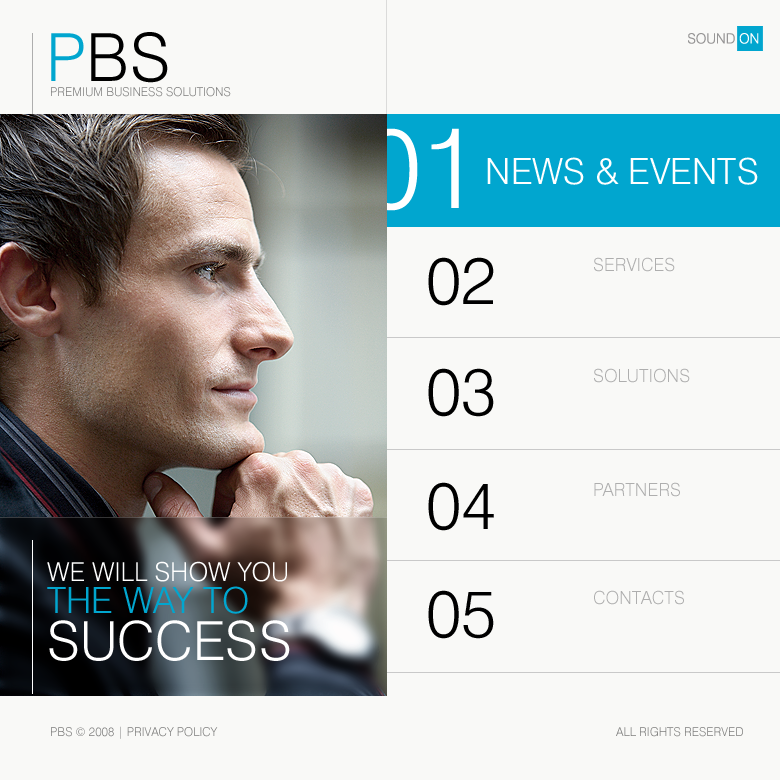
<style>
.page{position:relative;width:780px;height:780px;background:#f9f9f7}
.page>*{position:absolute;margin:0}
.t1{font:66.3px "Swiss721BT-Light";color:#000000;text-transform:uppercase}
.t2{font:66.3px "Swiss721BT-Light";color:#01a6cf;text-transform:uppercase}
.t3{font:13.9px "Swiss721BT-Light";color:#979696;text-transform:uppercase}
.t4{font:13.9px "Swiss721BT-Light";color:#ffffff;text-transform:uppercase}
.t5{font:12px "Swiss721BT-Light";color:#7c7c7b;text-transform:uppercase}
.t6{font:113.3px "Swiss721BT-Light";color:#ffffff;text-transform:uppercase}
.t7{font:36px "Swiss721BT-Light";color:#ffffff;text-transform:uppercase}
.t8{font:18px "Swiss721BT-Light";color:#aeaeae;text-transform:uppercase}
.t9{font:26px/47.9px "Swiss721BT-Light";color:#ffffff;text-transform:uppercase}
.t10{font:36px/32px "Swiss721BT-Light";color:#01a6cf;text-transform:uppercase}
.t11{font:54px/47.9px "Swiss721BT-Light";color:#ffffff;text-transform:uppercase}
.t12{font:12px "Swiss721BT-Light";text-transform:uppercase}
</style>
<div class="page">
<p class="t1" style="left:51px;top:32px;width:117px;height:51px"><span class="t2">P</span>BS</p>
<p class="t3" style="left:688px;top:33px;width:71px;height:11px">sound <span class="t4">on</span></p>
<p class="t5" style="left:51px;top:87px;width:180px;height:10px">premium business solutions</p>
<p class="t6" style="left:365px;top:128px;width:94px;height:83px">01</p>
<p class="t7" style="left:487px;top:157px;width:271px;height:28px">news &amp; events</p>
<p class="t1" style="left:428px;top:257px;width:66px;height:49px">02</p>
<p class="t8" style="left:594px;top:257px;width:81px;height:15px">services</p>
<p class="t1" style="left:428px;top:368px;width:66px;height:49px">03</p>
<p class="t8" style="left:594px;top:368px;width:96px;height:15px">solutions</p>
<p class="t1" style="left:428px;top:482px;width:66px;height:49px">04</p>
<p class="t8" style="left:594px;top:482px;width:86px;height:15px">partners</p>
<p class="t9" style="left:47px;top:561px;width:243px;height:100px">We will show you<br><span class="t10">the way to <br></span><span class="t11">success</span></p>
<p class="t1" style="left:428px;top:590px;width:66px;height:49px">05</p>
<p class="t8" style="left:594px;top:590px;width:90px;height:15px">contacts</p>
<p class="t12" style="left:51px;top:726px;width:167px;height:13px">pbs © 2008 | Privacy Policy</p>
<p class="t12" style="left:616px;top:727px;width:127px;height:10px">all rights reserved</p>
</div>
